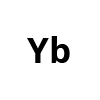
<style>
.page{position:relative;width:100px;height:100px;background:#ffffff}
.page>*{position:absolute;margin:0}
.t1{font:35px "OpenSans-Bold";color:#000000}
</style>
<div class="page">
<p class="t1" style="left:27px;top:36px;width:43px;height:27px">Yb</p>
</div>
